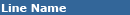
<style>
.page{position:relative;width:130px;height:15px;background:#336699}
.page>*{position:absolute;margin:0}
.t1{font:11px "Verdana-Bold";color:#ffffff}
</style>
<div class="page">
<p class="t1" style="left:1px;top:4px;width:65px;height:8px">Line Name</p>
</div>
